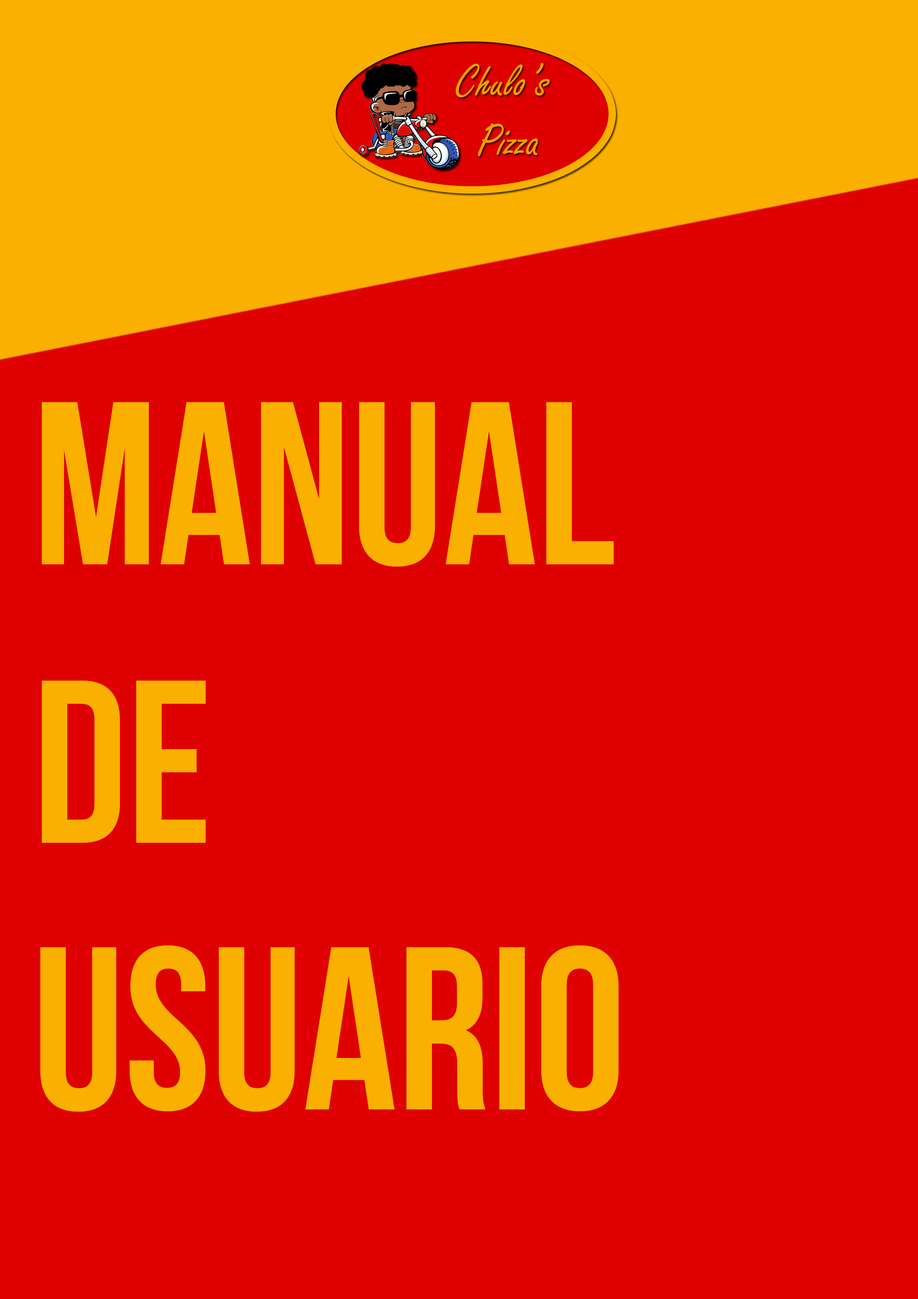
<style>
.page{position:relative;width:918px;height:1299px;background:#df0000}
.page>*{position:absolute;margin:0}
.t1{font:231.4px "BebasNeueBold";color:#fab000}
</style>
<div class="page">
<p class="t1" style="left:42px;top:402px;width:572px;height:165px">Manual</p>
<p class="t1" style="left:42px;top:680px;width:164px;height:163px">De</p>
<p class="t1" style="left:40px;top:945px;width:579px;height:167px">Usuario</p>
</div>
